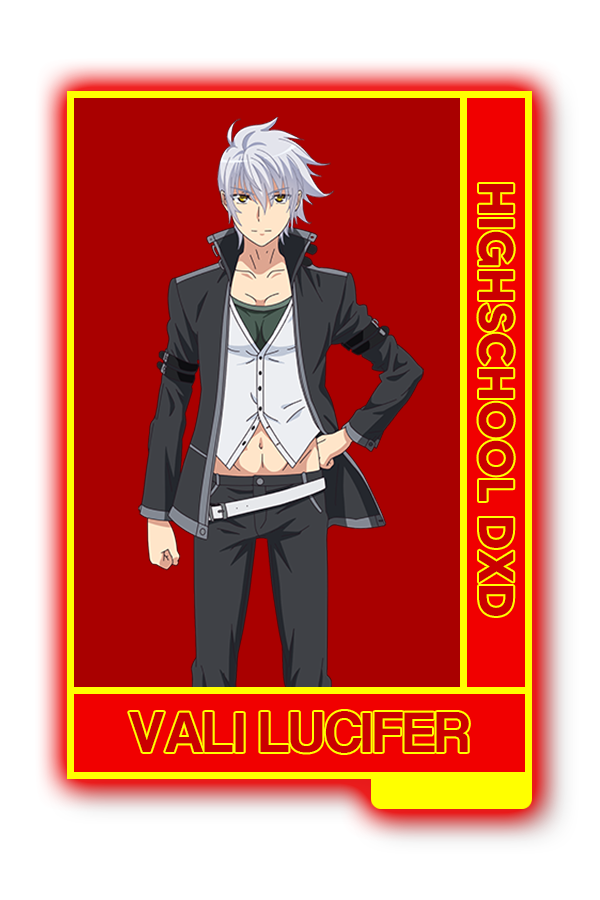
<style>
.page{position:relative;width:600px;height:900px;background:#a90000}
.page>*{position:absolute;margin:0}
.t1{font:48.8px "MADETOMMY-Bold";color:#ca0000}
.t2{font:60.1px "CoolveticaRg-Regular";color:#ca0000}
</style>
<div class="page">
<p class="t1" style="left:478px;top:184px;width:36px;height:432px;rotate:90deg">HIGHSCHOOL DXD</p>
<p class="t2" style="left:129px;top:711px;width:340px;height:42px">VALI LUCIFER</p>
</div>
